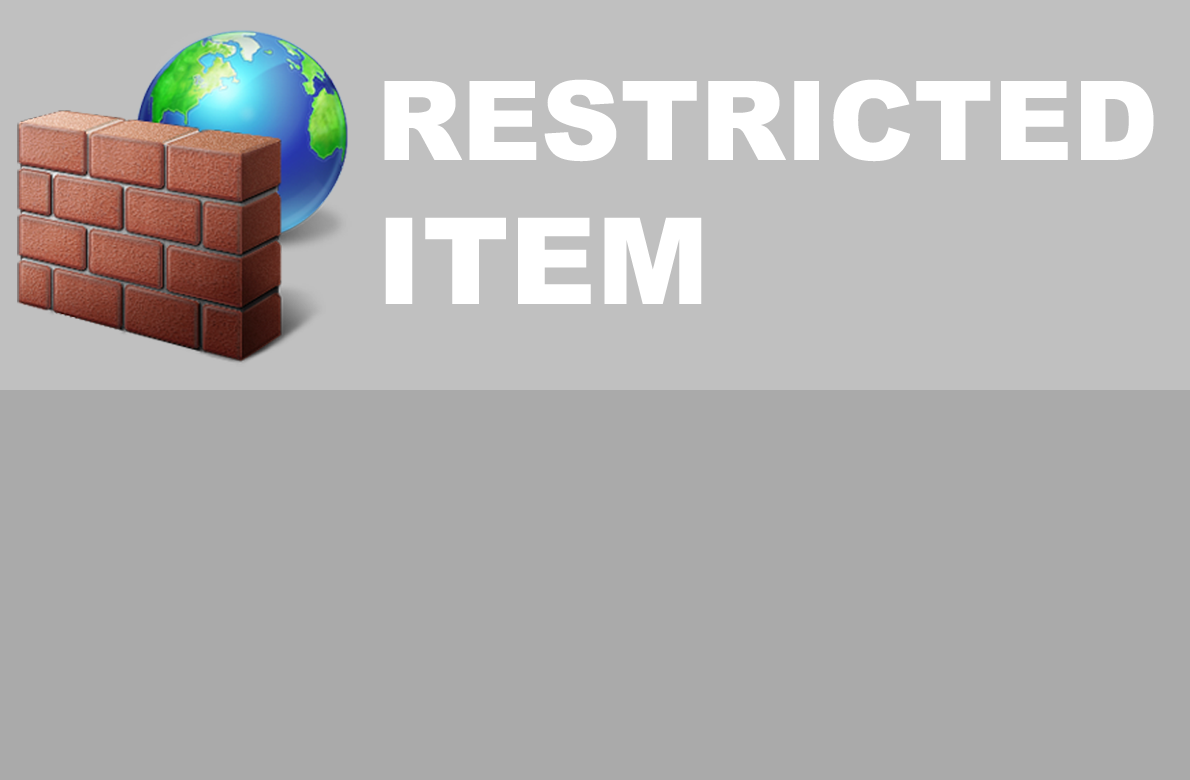
<style>
.page{position:relative;width:1190px;height:780px;background:#aaaaaa}
.page>*{position:absolute;margin:0}
.t1{font:110px "Arial-Black";color:#ffffff}
.t2{font:120px "Arial-Black";color:#ffffff}
</style>
<div class="page">
<p class="t1" style="left:384px;top:79px;width:770px;height:225px">RESTRICTED<br><span class="t2">ITEM</span></p>
</div>
